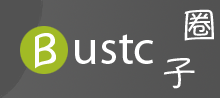
<style>
.page{position:relative;width:220px;height:98px}
.page>*{position:absolute;margin:0}
.t1{font:36px "YuppySC-Regular";color:#ffffff}
.t2{font:40px "Monaco";color:#fefefe}
.t3{font:48px "MyriadPro-Regular";color:#ffffff}
</style>
<div class="page">
<p class="t1" style="left:163px;top:9px;width:51px;height:80px">圈<br>子</p>
<p class="t2" style="left:35px;top:33px;width:21px;height:36px">B</p>
<p class="t3" style="left:75px;top:34px;width:78px;height:30px">ustc</p>
</div>
